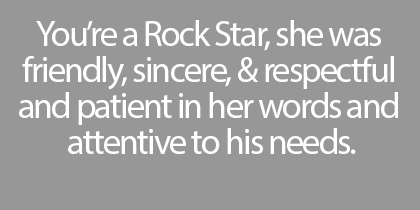
<style>
.page{position:relative;width:420px;height:210px;background:#979797}
.page>*{position:absolute;margin:0}
.t1{font:36px/36px "MyriadPro-Regular";letter-spacing:-0.05em;color:#ffffff}
</style>
<div class="page">
<p class="t1" style="left:19px;top:20px;width:379px;height:134px;text-align:center">You’re a Rock Star, she was <br>friendly, sincere, &amp; respectful <br>and patient in her words and <br>attentive to his needs.</p>
</div>
